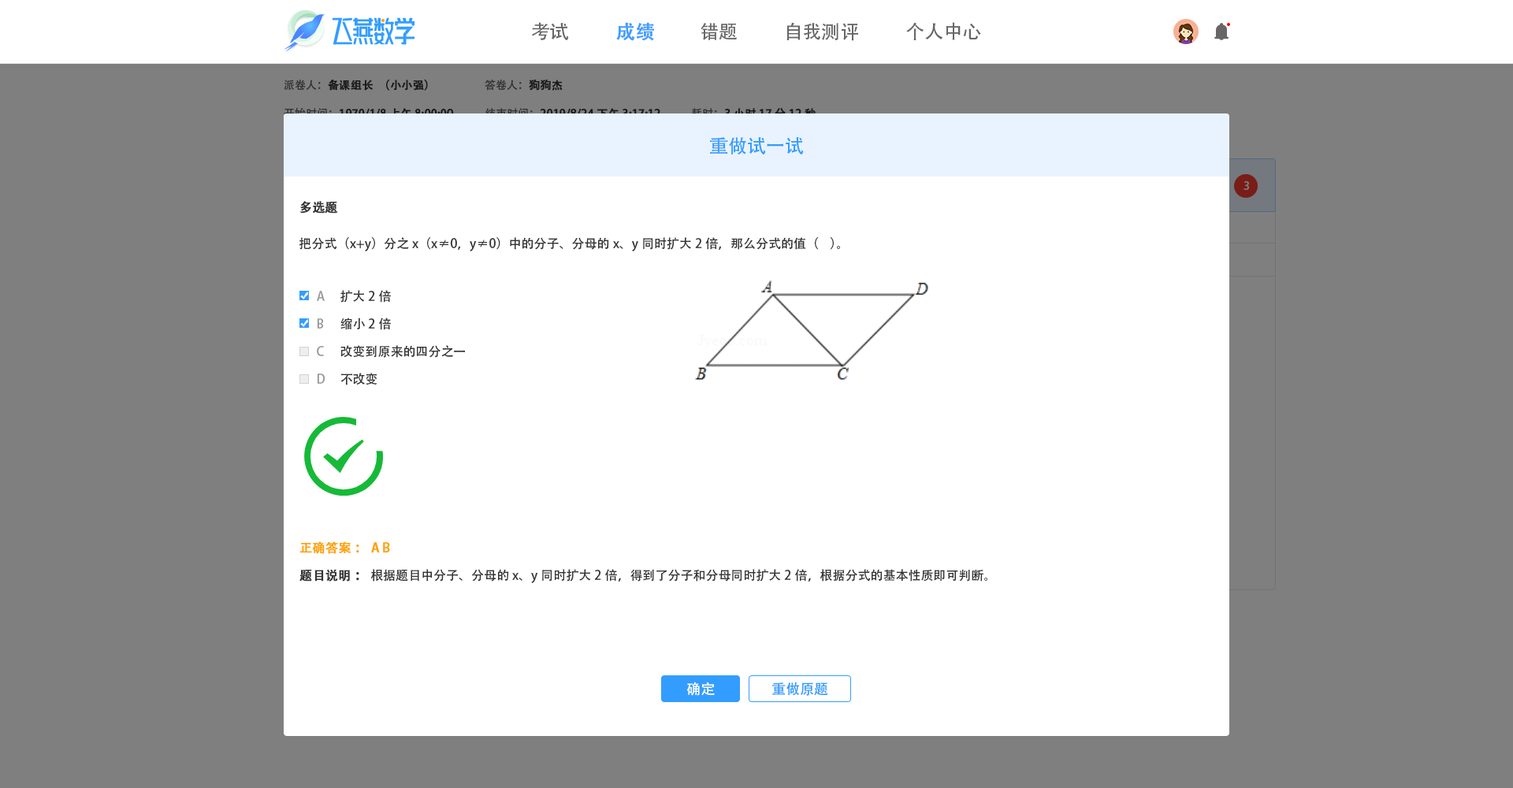
<style>
.page{position:relative;width:1513px;height:788px;background:#ffffff}
.page>*{position:absolute;margin:0}
.t1{font:18.9px "AdobeHeitiStd-Regular";color:#666666}
.t2{font:18.9px "AdobeHeitiStd-Regular";color:#409eff;font-weight:bold}
.t3{font:11px "AdobeHeitiStd-Regular";color:#191919;font-weight:bold}
.t4{font:11px "AdobeHeitiStd-Regular";color:#191919}
.t5{font:11px "AdobeHeitiStd-Regular"}
.t6{font:11px "AdobeHeitiStd-Regular";font-weight:bold}
.t7{font:18.9px "AdobeHeitiStd-Regular";color:#339dff}
.t8{font:11px "AdobeHeitiStd-Regular";color:#7f7f7f}
.t9{font:12.6px "AdobeHeitiStd-Regular";color:#333333;font-weight:bold}
.t10{font:12.6px "AdobeHeitiStd-Regular";color:#333333}
.t11{font:12.6px "AdobeHeitiStd-Regular";color:#999999}
.t12{font:12.6px "AdobeHeitiStd-Regular";color:#fea300;font-weight:bold}
.t13{font:14.2px "AdobeHeitiStd-Regular";color:#ffffff}
.t14{font:14.2px "AdobeHeitiStd-Regular";color:#339dff}
</style>
<div class="page">
<p class="t1" style="left:531px;top:22px;width:38px;height:18px">考试</p>
<p class="t2" style="left:616px;top:22px;width:38px;height:19px">成绩</p>
<p class="t1" style="left:701px;top:23px;width:36px;height:17px">错题</p>
<p class="t1" style="left:786px;top:22px;width:72px;height:19px">自我测评</p>
<p class="t1" style="left:906px;top:22px;width:75px;height:18px">个人中心</p>
<p class="t3" style="left:284px;top:80px;width:144px;height:11px"><span class="t4">派卷人：</span>备课组长（小小强）</p>
<p class="t5" style="left:485px;top:79px;width:78px;height:12px">答卷人：<span class="t6">狗狗杰</span></p>
<p class="t7" style="left:710px;top:137px;width:94px;height:17px">重做试一试</p>
<p class="t8" style="left:1244px;top:181px;width:5px;height:9px">3</p>
<p class="t9" style="left:300px;top:201px;width:38px;height:13px">多选题</p>
<p class="t10" style="left:299px;top:237px;width:541px;height:14px">把分式（x+y）分之x（x≠0，y≠0）中的分子、分母的x、y同时扩大2倍，那么分式的值（    ）。</p>
<p class="t11" style="left:317px;top:291px;width:8px;height:10px">A</p>
<p class="t10" style="left:340px;top:290px;width:51px;height:13px">扩大2倍</p>
<p class="t10" style="left:340px;top:318px;width:51px;height:12px">缩小2倍</p>
<p class="t11" style="left:317px;top:318px;width:7px;height:11px">B</p>
<p class="t11" style="left:317px;top:346px;width:7px;height:10px">C</p>
<p class="t10" style="left:340px;top:345px;width:125px;height:13px">改变到原来的四分之一</p>
<p class="t11" style="left:317px;top:374px;width:8px;height:10px">D</p>
<p class="t10" style="left:340px;top:373px;width:37px;height:12px">不改变</p>
<p class="t12" style="left:300px;top:541px;width:90px;height:13px">正确答案： A B</p>
<p class="t10" style="left:299px;top:569px;width:688px;height:14px"><span class="t9">题目说明： </span>根据题目中分子、分母的x、y同时扩大2倍，得到了分子和分母同时扩大2倍，根据分式的基本性质即可判断。</p>
<p class="t13" style="left:686px;top:682px;width:29px;height:14px">确定</p>
<p class="t14" style="left:772px;top:682px;width:56px;height:14px">重做原题</p>
</div>
